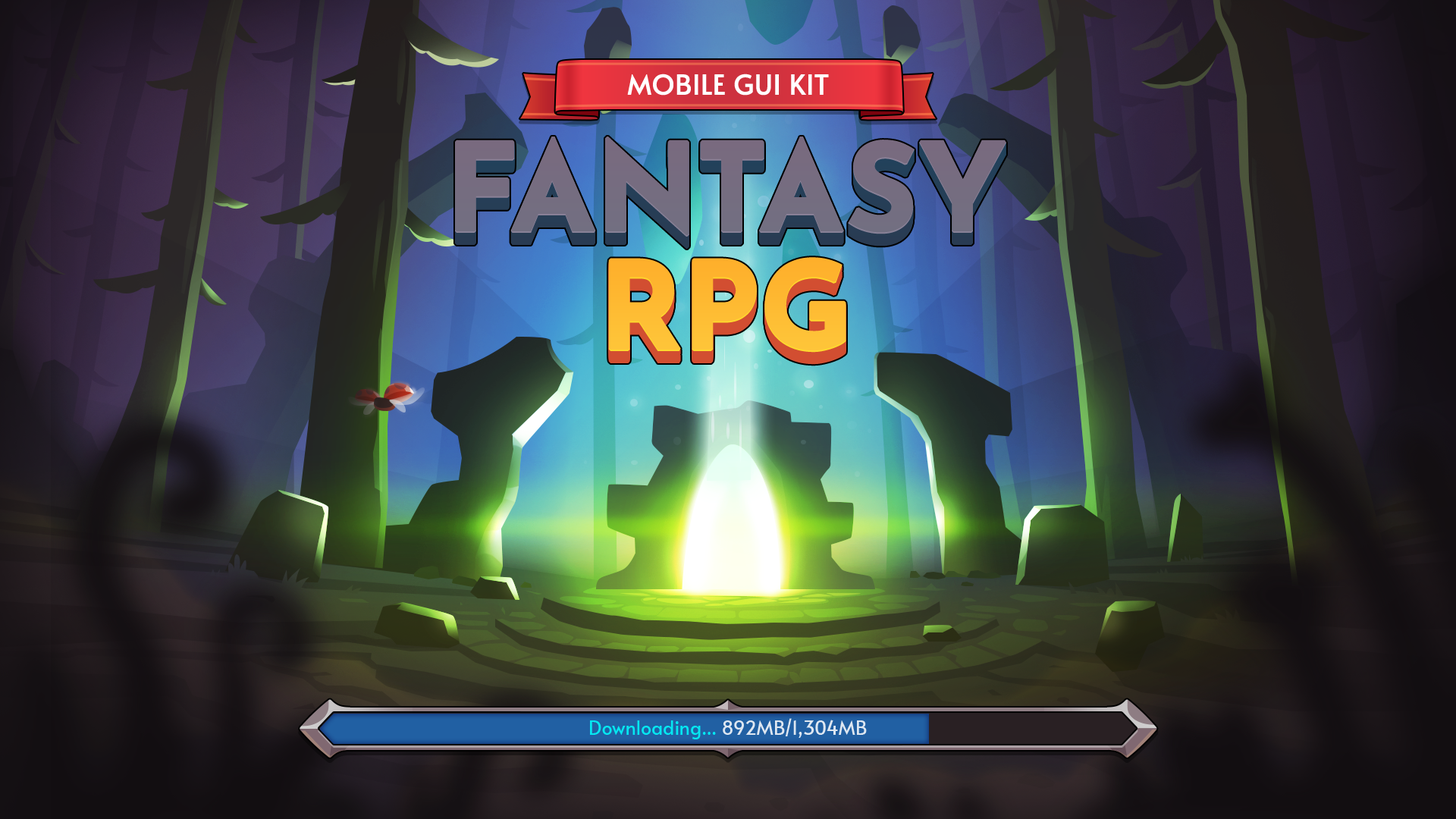
<style>
.page{position:relative;width:1456px;height:819px}
.page>*{position:absolute;margin:0}
.t1{font:27.3px "Alata-Regular";color:#ffffff;text-transform:uppercase;font-weight:bold}
.t2{font:19px "Alata-Regular";letter-spacing:0.01em}
</style>
<div class="page">
<p class="t1" style="left:627px;top:74px;width:202px;height:22px">mobile GUI kit</p>
<p class="t2" style="left:590px;top:718px;width:277px;height:21px">Downloading... 892MB/1,304MB</p>
</div>
